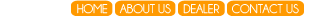
<style>
.page{position:relative;width:309px;height:16px;background:#ff9900}
.page>*{position:absolute;margin:0}
.t1{font:12.5px "Champagne&Limousines";color:#ffffff}
</style>
<div class="page">
<p class="t1" style="left:77px;top:4px;width:222px;height:10px">HOME    ABOUT US    DEALER    CONTACT US</p>
<p class="t1" style="left:77px;top:4px;width:222px;height:10px">HOME    ABOUT US    DEALER    CONTACT US</p>
</div>
